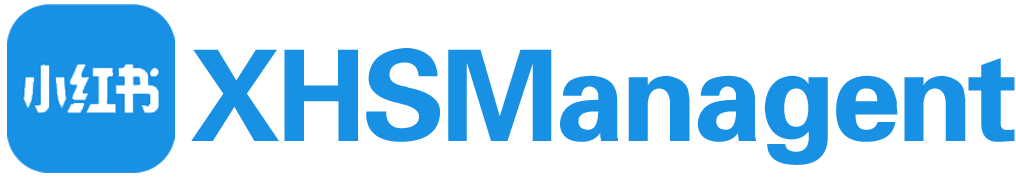
<style>
.page{position:relative;width:1016px;height:177px;background:#ffffff}
.page>*{position:absolute;margin:0}
.t1{font:125.5px "FZDHTJW--GB1-0";letter-spacing:-0.06em;color:#1890e4;font-weight:bold}
</style>
<div class="page">
<p class="t1" style="left:191px;top:47px;width:824px;height:118px">XHSManagent</p>
</div>
